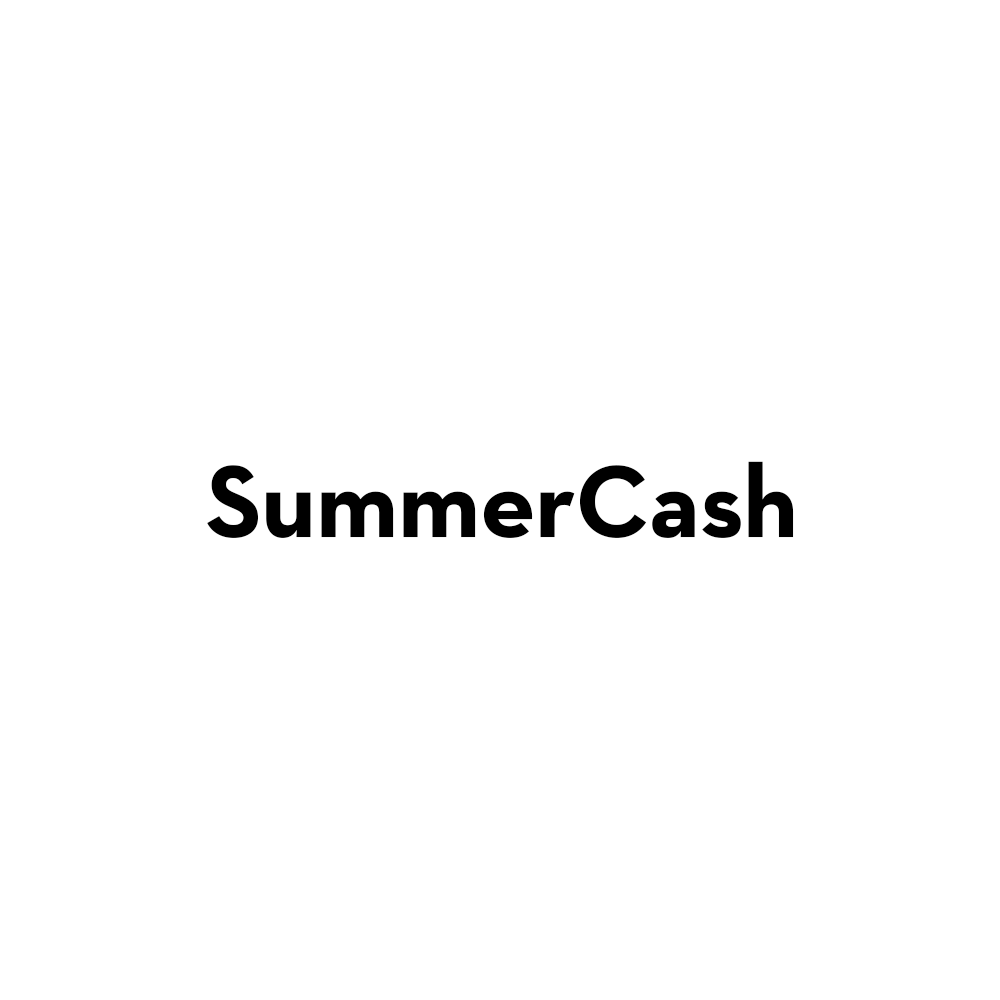
<style>
.page{position:relative;width:1000px;height:1000px;background:#ffffff}
.page>*{position:absolute;margin:0}
.t1{font:104.2px "NeutraText-Bold";letter-spacing:-0.005em;color:#000000}
</style>
<div class="page">
<p class="t1" style="left:207px;top:461px;width:587px;height:77px">SummerCash</p>
</div>
